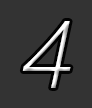
<style>
.page{position:relative;width:92px;height:108px;background:#333333}
.page>*{position:absolute;margin:0}
.t1{font:96px "SegoeUI-LightItalic"}
</style>
<div class="page">
<p class="t1" style="left:22px;top:21px;width:49px;height:67px">4</p>
</div>
